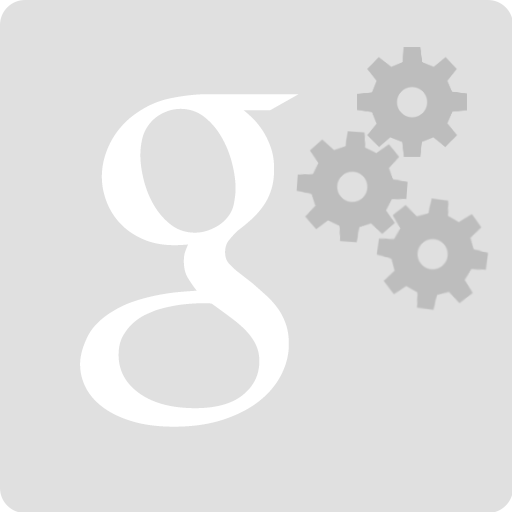
<style>
.page{position:relative;width:512px;height:512px;background:#e0e0e0}
.page>*{position:absolute;margin:0}
.t1{font:436.2px "Catull-Regular";letter-spacing:-0.04em;color:#ffffff}
</style>
<div class="page">
<p class="t1" style="left:80px;top:94px;width:219px;height:333px">g</p>
</div>
